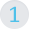
<style>
.page{position:relative;width:30px;height:30px;background:#e5e7ea}
.page>*{position:absolute;margin:0}
.t1{font:24px "Calibri";color:#4fc1e9;text-transform:uppercase}
</style>
<div class="page">
<p class="t1" style="left:10px;top:6px;width:10px;height:16px">1</p>
</div>
